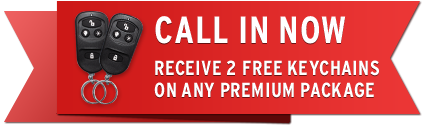
<style>
.page{position:relative;width:424px;height:128px}
.page>*{position:absolute;margin:0}
.t1{font:35px/21.6px "Interstate-BoldCondensed";color:#ffffff}
.t2{font:64.9px/21.6px "Interstate-BoldCondensed";color:#ffffff}
</style>
<div class="page">
<p class="t1" style="left:154px;top:16px;width:225px;height:82px"><span class="t2">CALL IN NOW<br></span>RECEIVE 2 FREE KEYCHAINS<br>ON ANY PREMIUM PACKAGE</p>
</div>
